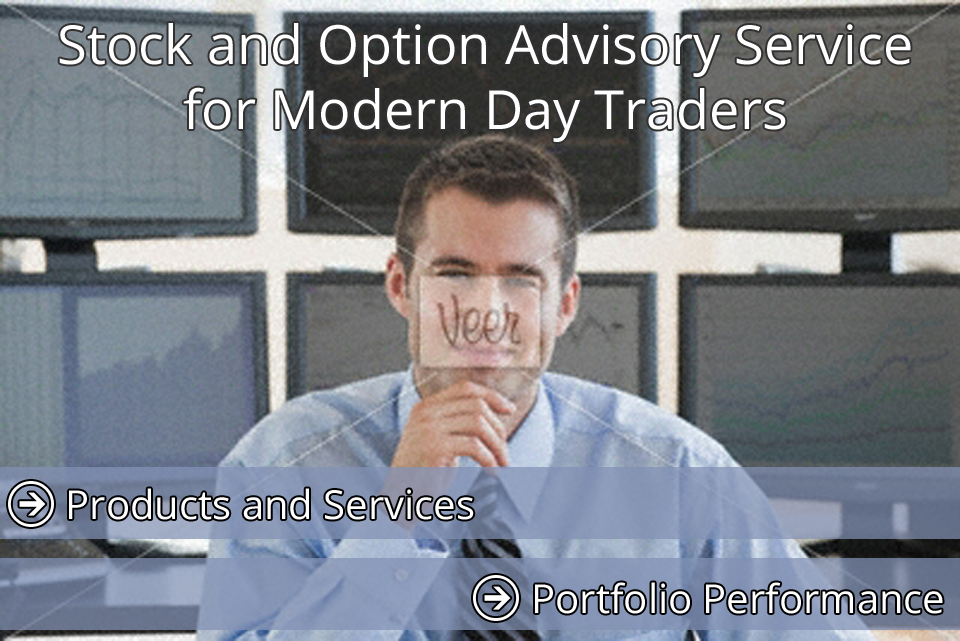
<style>
.page{position:relative;width:960px;height:641px}
.page>*{position:absolute;margin:0}
.t1{font:54px "OpenSans";color:#ffffff}
.t2{font:40px "OpenSans";color:#ffffff}
</style>
<div class="page">
<p class="t1" style="left:59px;top:23px;width:852px;height:119px;text-align:center">Stock and Option Advisory Service<br>for Modern Day Traders</p>
<p class="t2" style="left:69px;top:488px;width:405px;height:32px">Products and Services</p>
<p class="t2" style="left:535px;top:582px;width:408px;height:32px">Portfolio Performance</p>
</div>
